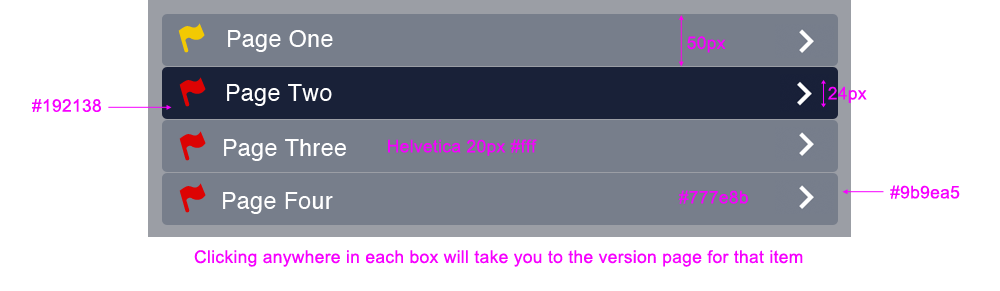
<style>
.page{position:relative;width:1000px;height:291px;background:#ffffff}
.page>*{position:absolute;margin:0}
.t1{font:17.4px "ArialMT";letter-spacing:0.02em;color:#f600ff}
</style>
<div class="page">
<p class="t1" style="left:687px;top:36px;width:39px;height:17px">50px</p>
<p class="t1" style="left:828px;top:86px;width:39px;height:17px">24px</p>
<p class="t1" style="left:32px;top:99px;width:69px;height:13px">#192138</p>
<p class="t1" style="left:388px;top:139px;width:149px;height:17px">Helvetica 20px #fff</p>
<p class="t1" style="left:890px;top:185px;width:70px;height:14px">#9b9ea5</p>
<p class="t1" style="left:679px;top:190px;width:69px;height:14px">#777e8b</p>
<p class="t1" style="left:194px;top:250px;width:609px;height:17px">Clicking anywhere in each box will take you to the version page for that item</p>
</div>
